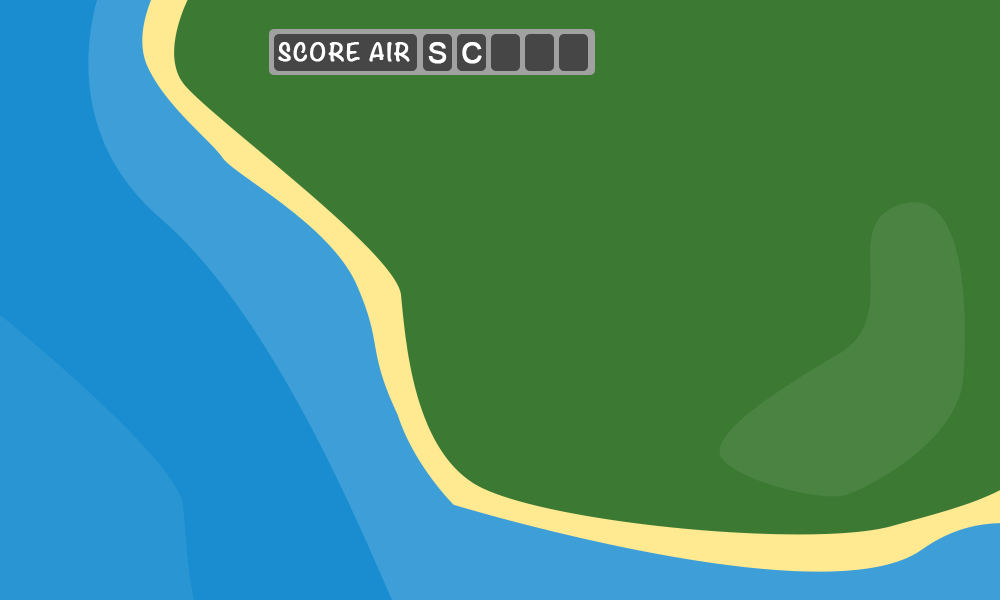
<style>
.page{position:relative;width:1000px;height:600px;background:#3c7a34}
.page>*{position:absolute;margin:0}
.t1{font:20.8px "Noteworthy-Bold";letter-spacing:0.075em;color:#ffffff;font-weight:bold}
.t2{font:29.2px "ArialMT";letter-spacing:0.075em;color:#ffffff;font-weight:bold}
</style>
<div class="page">
<p class="t1" style="left:278px;top:42px;width:132px;height:20px">SCORE AIR</p>
<p class="t2" style="left:428px;top:42px;width:19px;height:22px">S</p>
<p class="t2" style="left:462px;top:42px;width:20px;height:22px">C</p>
</div>
